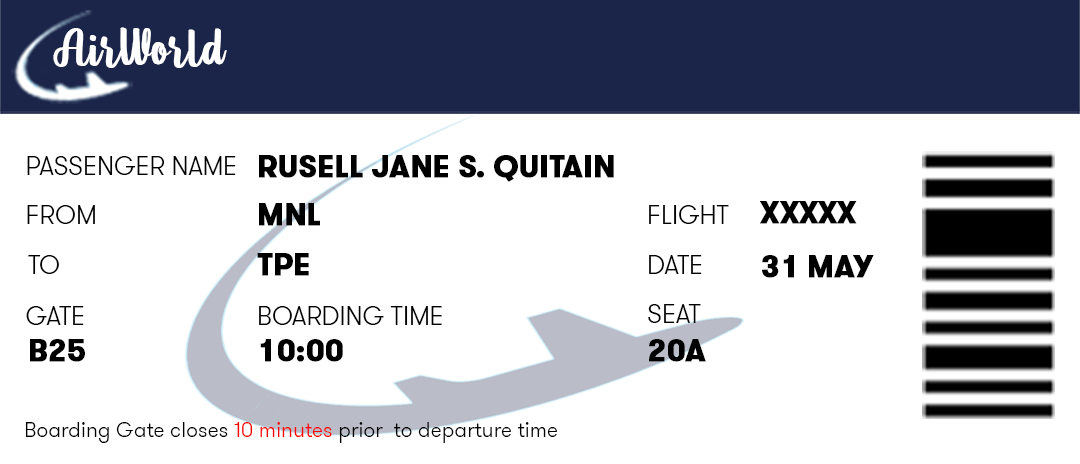
<style>
.page{position:relative;width:1080px;height:464px;background:#ffffff}
.page>*{position:absolute;margin:0}
.t1{font:55.9px "Pintgram-Regular";color:#ffffff}
.t2{font:25.8px "GTWalsheimProLight";color:#000000;text-transform:uppercase}
.t3{font:30.1px "GTWalsheim-Bold";color:#000000;text-transform:uppercase;font-weight:bold}
.t4{font:21.5px "GTWalsheimProLight";color:#000000}
.t5{font:21.5px "GTWalsheimProLight";color:#ff0000}
</style>
<div class="page">
<p class="t1" style="left:53px;top:27px;width:174px;height:41px">AirWorld</p>
<p class="t2" style="left:27px;top:156px;width:209px;height:19px">Passenger Name</p>
<p class="t3" style="left:259px;top:155px;width:355px;height:27px">RUSELL JANE S. QUITAIN</p>
<p class="t2" style="left:27px;top:205px;width:68px;height:19px">FROM</p>
<p class="t3" style="left:259px;top:203px;width:61px;height:23px">MNL</p>
<p class="t2" style="left:649px;top:205px;width:80px;height:19px">FLIGHT</p>
<p class="t3" style="left:760px;top:201px;width:97px;height:23px">XXXXX</p>
<p class="t2" style="left:28px;top:255px;width:31px;height:19px">To</p>
<p class="t3" style="left:257px;top:253px;width:52px;height:23px">TPE</p>
<p class="t2" style="left:649px;top:255px;width:53px;height:19px">DATE</p>
<p class="t3" style="left:762px;top:255px;width:112px;height:23px">31 May</p>
<p class="t2" style="left:648px;top:304px;width:53px;height:19px">seat</p>
<p class="t2" style="left:26px;top:306px;width:58px;height:19px">GATE</p>
<p class="t2" style="left:259px;top:306px;width:183px;height:19px">Boarding Time</p>
<p class="t3" style="left:30px;top:339px;width:55px;height:23px">B25</p>
<p class="t3" style="left:260px;top:339px;width:83px;height:23px">10:00</p>
<p class="t3" style="left:649px;top:339px;width:57px;height:23px">20A</p>
<p class="t4" style="left:25px;top:422px;width:532px;height:21px">Boarding Gate closes <span class="t5">10 minutes</span> prior  to departure time</p>
</div>
